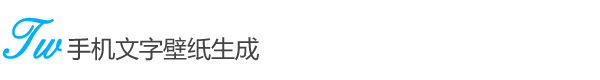
<style>
.page{position:relative;width:600px;height:80px;background:#ffffff}
.page>*{position:absolute;margin:0}
.t1{font:57.6px "ElegantScript";color:#00affe;font-weight:bold;scale:0.83 1}
.t2{font:24px "MicrosoftYaHei";color:#434343}
</style>
<div class="page">
<p class="t1" style="left:2px;top:17px;width:60px;height:42px">Tw</p>
<p class="t2" style="left:67px;top:37px;width:192px;height:24px">手机文字壁纸生成</p>
</div>
